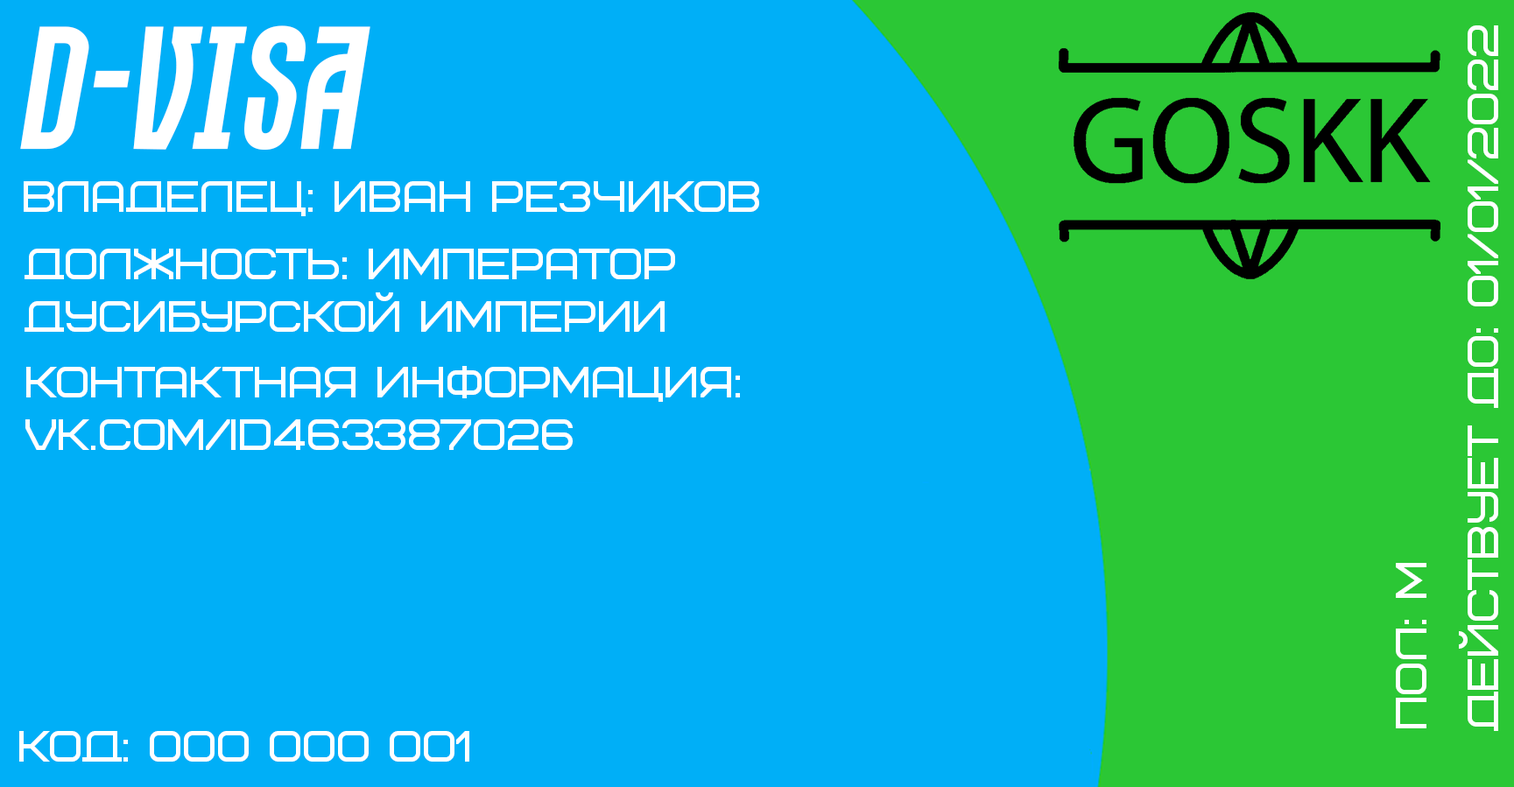
<style>
.page{position:relative;width:1514px;height:787px;background:#00aff7}
.page>*{position:absolute;margin:0}
.t1{font:176px "Dobrozrachniy-Oblique";color:#ffffff}
.t2{font:43.8px "Bicubik";color:#ffffff}
</style>
<div class="page">
<p class="t1" style="left:20px;top:25px;width:350px;height:125px">D-visa</p>
<p class="t2" style="left:1459px;top:25px;width:40px;height:706px;rotate:-90deg">действует до: 01/01/2022</p>
<p class="t2" style="left:24px;top:181px;width:735px;height:35px">владелец: Иван резчиков</p>
<p class="t2" style="left:25px;top:249px;width:650px;height:83px">Должность: император <br>дусибурской империи</p>
<p class="t2" style="left:25px;top:366px;width:715px;height:84px">контактная информация: <br>vk.com/id463387026</p>
<p class="t2" style="left:1396px;top:563px;width:31px;height:166px;rotate:-90deg">пол: м</p>
<p class="t2" style="left:19px;top:731px;width:450px;height:31px">код: 000 000 001</p>
</div>
